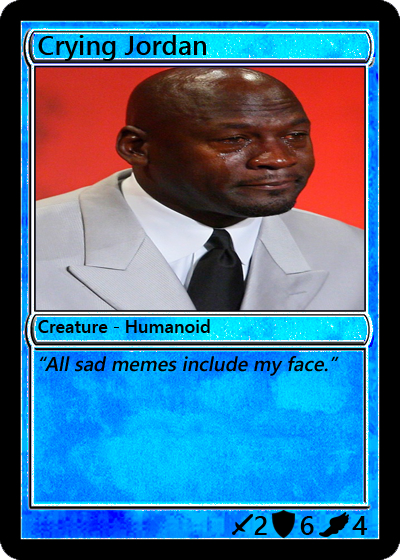
<style>
.page{position:relative;width:400px;height:560px}
.page>*{position:absolute;margin:0}
.t1{font:27px "YuGothicUI-Semibold";color:#000000}
.t2{font:18px "YuGothicUI-Semibold";color:#000000}
.t3{font:20px "YuGothicUI-Semibold";color:#000000;font-style:italic}
</style>
<div class="page">
<p class="t1" style="left:38px;top:35px;width:168px;height:26px">Crying Jordan</p>
<p class="t2" style="left:38px;top:319px;width:172px;height:14px">Creature - Humanoid</p>
<p class="t3" style="left:39px;top:356px;width:300px;height:20px">“All sad memes include my face.”</p>
<p class="t1" style="left:254px;top:516px;width:13px;height:19px">2</p>
<p class="t1" style="left:300px;top:516px;width:14px;height:19px">6</p>
<p class="t1" style="left:352px;top:516px;width:15px;height:19px">4</p>
</div>
